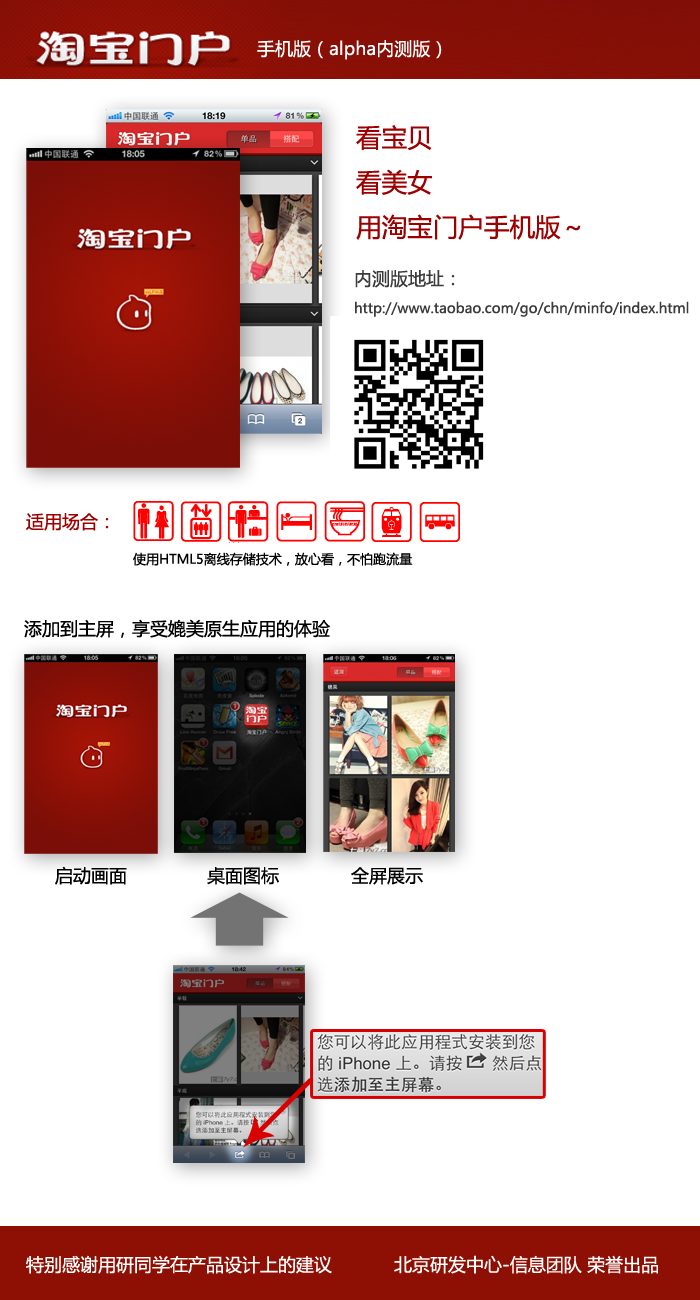
<style>
.page{position:relative;width:700px;height:1300px;background:#ffffff}
.page>*{position:absolute;margin:0}
.t1{font:18px "MicrosoftYaHei";color:#ffffff}
.t2{font:25.6px "MicrosoftYaHei";color:#9c0000}
.t3{font:14px "MicrosoftYaHei";color:#3c3c3c}
.t4{font:18px "MicrosoftYaHei";color:#3c3c3c}
.t5{font:18px "MicrosoftYaHei";color:#9c0000}
.t6{font:13px "MicrosoftYaHei";color:#000000}
.t7{font:18px "MicrosoftYaHei";color:#000000}
</style>
<div class="page">
<p class="t1" style="left:257px;top:40px;width:185px;height:20px">手机版（alpha内测版）</p>
<p class="t2" style="left:356px;top:125px;width:225px;height:115px">看宝贝<br>看美女<br>用淘宝门户手机版～</p>
<p class="t3" style="left:355px;top:270px;width:334px;height:47px"><span class="t4">内测版地址：<br></span>http://www.taobao.com/go/chn/minfo/index.html</p>
<p class="t5" style="left:26px;top:513px;width:83px;height:18px">适用场合：</p>
<p class="t6" style="left:133px;top:552px;width:280px;height:14px">使用HTML5离线存储技术，放心看，不怕跑流量</p>
<p class="t7" style="left:24px;top:619px;width:306px;height:19px">添加到主屏，享受媲美原生应用的体验</p>
<p class="t7" style="left:55px;top:866px;width:72px;height:19px">启动画面</p>
<p class="t7" style="left:207px;top:867px;width:72px;height:18px">桌面图标</p>
<p class="t7" style="left:351px;top:867px;width:72px;height:18px">全屏展示</p>
<p class="t1" style="left:26px;top:1255px;width:306px;height:19px">特别感谢用研同学在产品设计上的建议</p>
<p class="t1" style="left:394px;top:1255px;width:264px;height:19px">北京研发中心-信息团队 荣誉出品</p>
</div>
